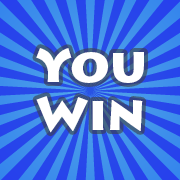
<style>
.page{position:relative;width:180px;height:180px}
.page>*{position:absolute;margin:0}
.t1{font:48px/48px "LithosPro-Black";letter-spacing:0.006em;color:#ffffff}
</style>
<div class="page">
<p class="t1" style="left:36px;top:48px;width:108px;height:85px;text-align:center">You<br>Win</p>
</div>
